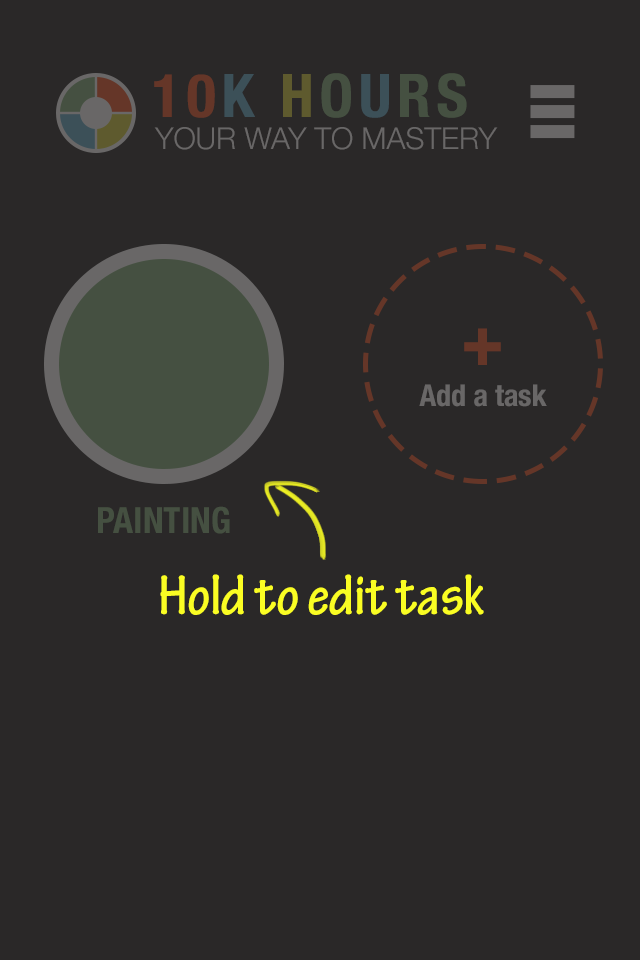
<style>
.page{position:relative;width:640px;height:960px;background:#2a2828}
.page>*{position:absolute;margin:0}
.t1{font:60px "HelveticaNeue-CondensedBold";letter-spacing:0.1em}
.t2{font:30px "HelveticaNeue-Light";color:#696767}
.t3{font:72px "HelveticaNeue-CondensedBold";color:#653628}
.t4{font:30px "HelveticaNeue-CondensedBold";color:#696767}
.t5{font:36px "HelveticaNeue-CondensedBold";color:#455041}
.t6{font:60px "TektonPro-BoldCond";letter-spacing:-0.005em;color:#fafd23}
</style>
<div class="page">
<p class="t1" style="left:154px;top:73px;width:313px;height:45px">10K HOURS</p>
<p class="t2" style="left:154px;top:127px;width:344px;height:23px">YOUR WAY TO MASTERY</p>
<p class="t3" style="left:464px;top:328px;width:37px;height:37px">+</p>
<p class="t4" style="left:419px;top:384px;width:128px;height:23px">Add a task</p>
<p class="t5" style="left:98px;top:506px;width:132px;height:28px">PAINTING</p>
<p class="t6" style="left:160px;top:574px;width:324px;height:41px">Hold to edit task</p>
</div>
